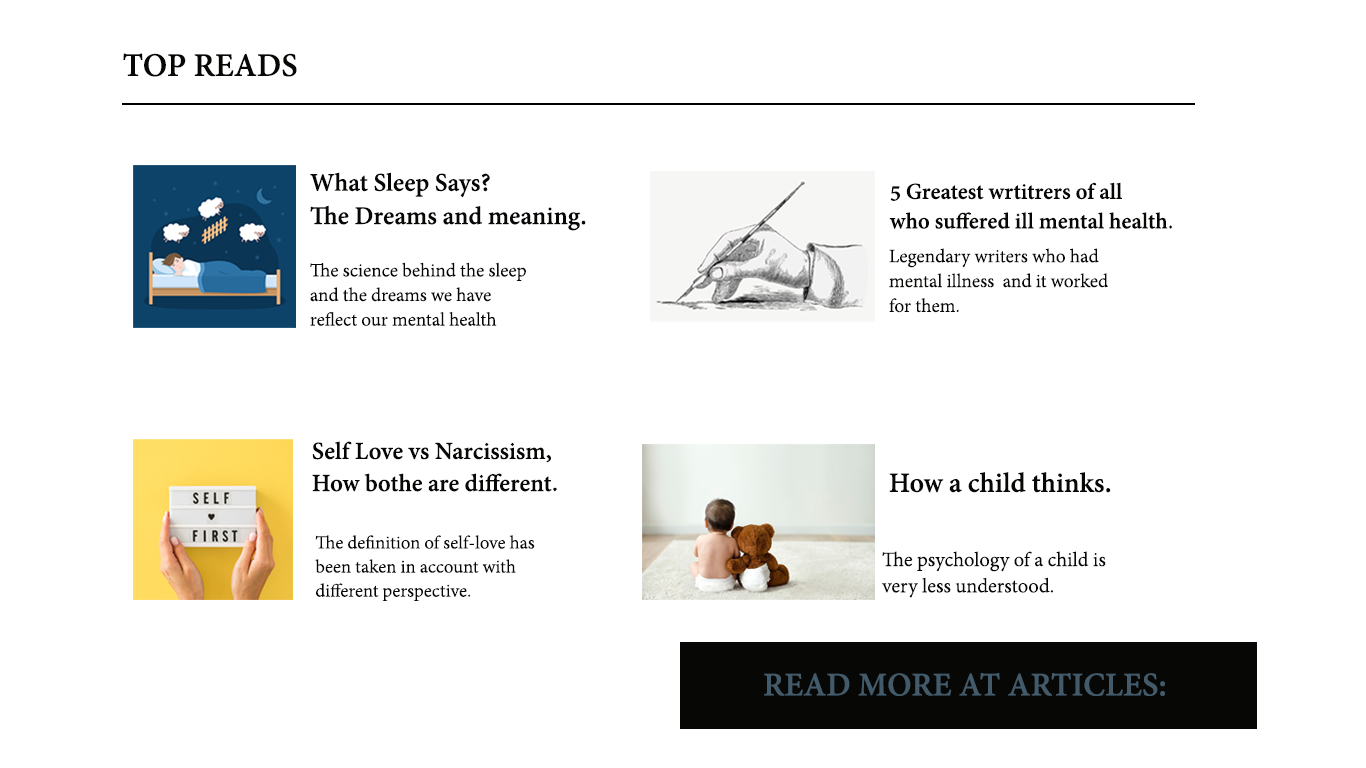
<style>
.page{position:relative;width:1366px;height:768px;background:#ffffff}
.page>*{position:absolute;margin:0}
.t1{font:36px "AdobeDevanagari-Bold";color:#070706}
.t2{font:27.8px "AdobeDevanagari-Bold";color:#070706}
.t3{font:24.6px "AdobeDevanagari-Bold";color:#070706}
.t4{font:20.7px "AdobeDevanagari-Regular";color:#070706}
.t5{font:20.5px "AdobeDevanagari-Regular";color:#070706}
.t6{font:26.7px "AdobeDevanagari-Bold";color:#070706}
.t7{font:30.3px "AdobeDevanagari-Bold";color:#070706}
.t8{font:20px "AdobeDevanagari-Regular";color:#070706}
.t9{font:21.9px "AdobeDevanagari-Regular";color:#070706}
.t10{font:36px "AdobeDevanagari-Bold";color:#425a69}
</style>
<div class="page">
<p class="t1" style="left:123px;top:53px;width:174px;height:24px">TOP READS</p>
<p class="t2" style="left:310px;top:172px;width:276px;height:59px">What Sleep Says? <br>The Dreams and meaning.</p>
<p class="t3" style="left:889px;top:182px;width:284px;height:47px">5 Greatest wrtitrers of all <br>who suffered ill mental health.</p>
<p class="t4" style="left:889px;top:248px;width:219px;height:65px">Legendary writers who had mental illness  and it worked for them.</p>
<p class="t5" style="left:310px;top:262px;width:216px;height:64px">The science behind the sleep and the dreams we have reflect our mental health</p>
<p class="t6" style="left:312px;top:441px;width:245px;height:51px">Self Love vs Narcissism,<br>How bothe are different.</p>
<p class="t7" style="left:889px;top:472px;width:222px;height:21px">How a child thinks.</p>
<p class="t8" style="left:315px;top:535px;width:220px;height:66px">The definition of self-love has been taken in account with different perspective.</p>
<p class="t9" style="left:882px;top:551px;width:224px;height:47px">The psychology of a child is very less understood.</p>
<p class="t10" style="left:764px;top:673px;width:401px;height:23px">READ MORE AT ARTICLES:</p>
</div>
